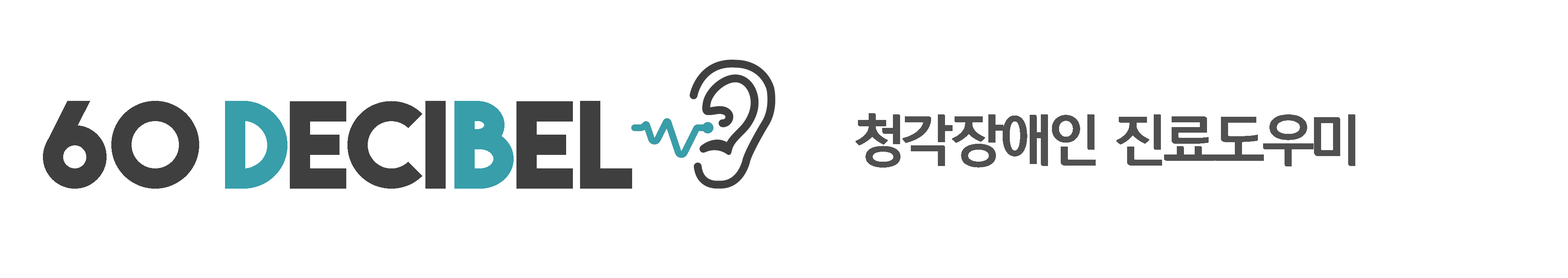
<style>
.page{position:relative;width:1568px;height:278px;background:#ffffff}
.page>*{position:absolute;margin:0}
.t1{font:119.3px "TheBoldFont";letter-spacing:-0.025em;color:#3f3f3f}
.t2{font:119.3px "TheBoldFont";letter-spacing:0.01em;color:#3f3f3f}
.t3{font:119.3px "TheBoldFont";letter-spacing:-0.005em;color:#379eaa}
.t4{font:119.3px "TheBoldFont";letter-spacing:-0.025em;color:#379eaa}
.t5{font:55.7px "KoreanDREAM5-R";letter-spacing:-0.075em;color:#505050}
</style>
<div class="page">
<p class="t1" style="left:43px;top:101px;width:589px;height:88px"><span class="t2">60 </span><span class="t3">D</span>eci<span class="t4">B</span>el</p>
<p class="t5" style="left:856px;top:113px;width:499px;height:55px">청각장애인 진료도우미</p>
</div>
